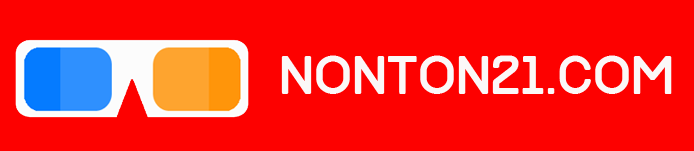
<style>
.page{position:relative;width:694px;height:151px;background:#fd0100}
.page>*{position:absolute;margin:0}
.t1{font:48px "Track";color:#fbf8f8}
</style>
<div class="page">
<p class="t1" style="left:281px;top:55px;width:391px;height:39px">Nonton21.com</p>
</div>
